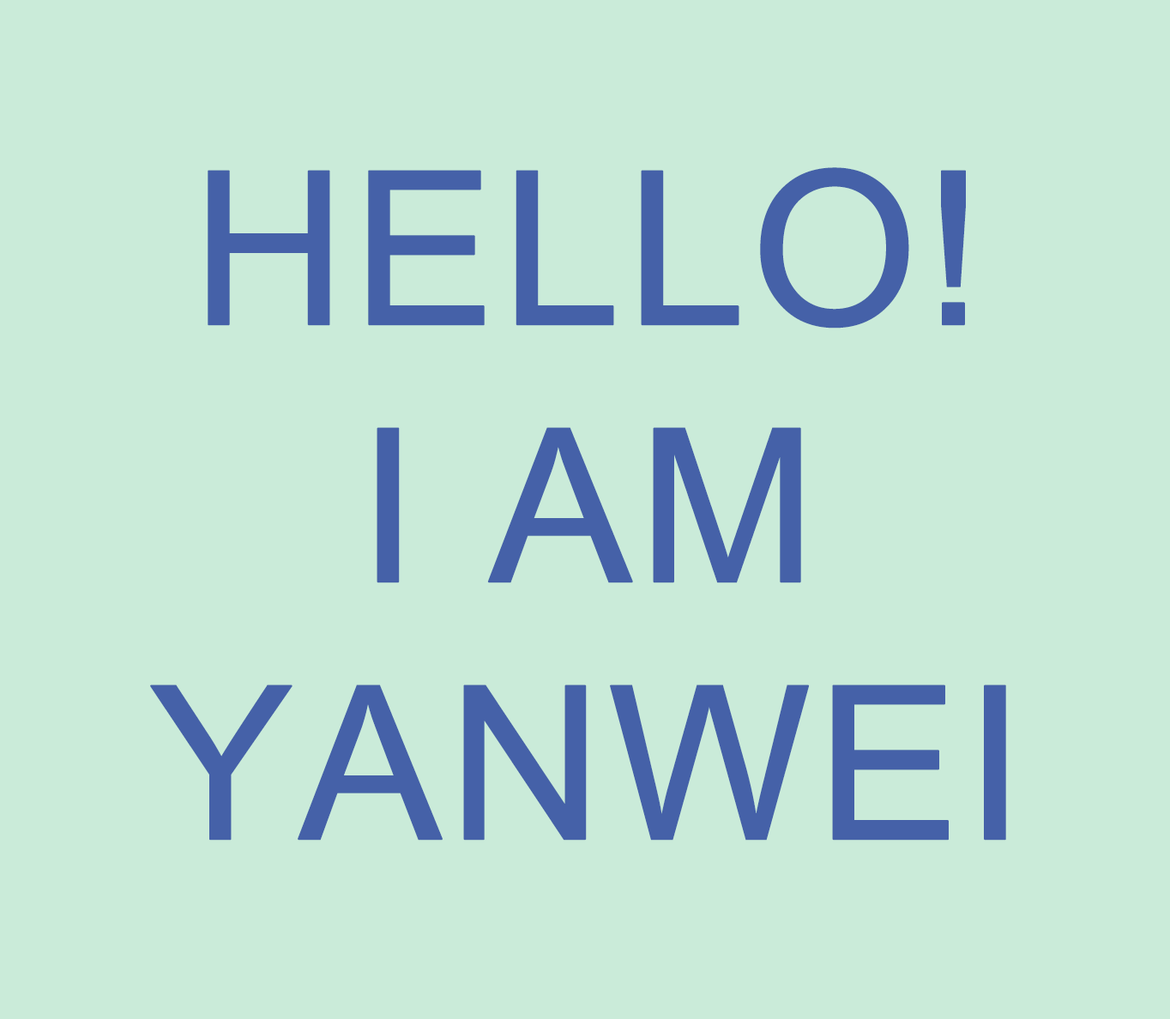
<style>
.page{position:relative;width:1170px;height:1019px;background:#caebd9}
.page>*{position:absolute;margin:0}
.t1{font:214.5px "DokChampa";color:#4561a8;text-transform:uppercase;font-weight:bold}
</style>
<div class="page">
<p class="t1" style="left:150px;top:167px;width:856px;height:674px;text-align:center">Hello!<br>I am <br>Yanwei</p>
</div>
